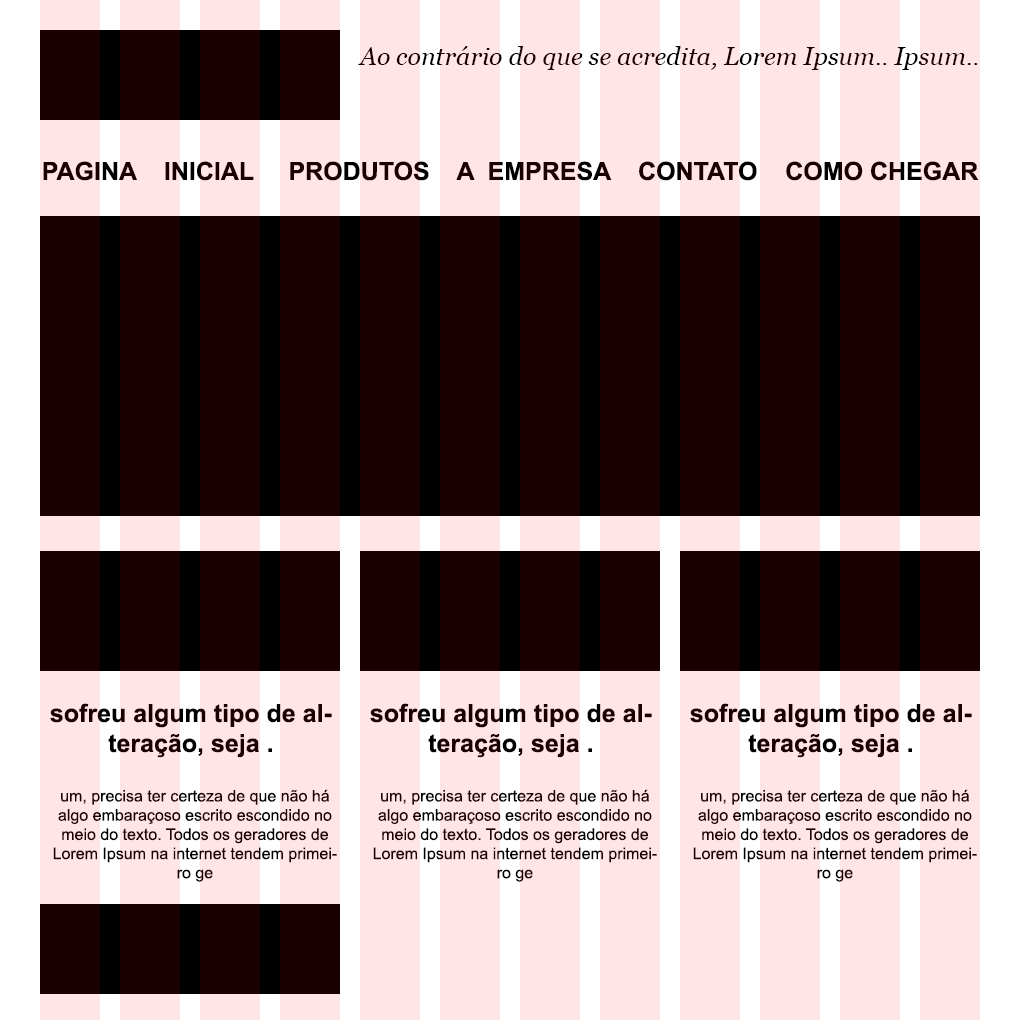
<style>
.page{position:relative;width:1020px;height:1020px;background:#ffe5e5}
.page>*{position:absolute;margin:0}
.t1{font:25px "Georgia-Italic";color:#1a0000}
.t2{font:25px "Arial-BoldMT";color:#1a0000}
.t3{font:16px "ArialMT";color:#1a0000}
</style>
<div class="page">
<p class="t1" style="left:358px;top:46px;width:620px;height:24px">Ao contrário do que se acredita, Lorem Ipsum.. Ipsum..</p>
<p class="t2" style="left:43px;top:161px;width:936px;height:20px">PAGINA    INICIAL     PRODUTOS    A  EMPRESA    CONTATO    COMO CHEGAR</p>
<p class="t2" style="left:50px;top:703px;width:282px;height:55px;text-align:center">sofreu algum tipo de alteração, seja .</p>
<p class="t2" style="left:370px;top:703px;width:282px;height:55px;text-align:center">sofreu algum tipo de alteração, seja .</p>
<p class="t2" style="left:690px;top:703px;width:282px;height:55px;text-align:center">sofreu algum tipo de alteração, seja .</p>
<p class="t3" style="left:53px;top:789px;width:284px;height:93px;text-align:center">um, precisa ter certeza de que não há algo embaraçoso escrito escondido no meio do texto. Todos os geradores de Lorem Ipsum na internet tendem primeiro ge</p>
<p class="t3" style="left:373px;top:789px;width:284px;height:93px;text-align:center">um, precisa ter certeza de que não há algo embaraçoso escrito escondido no meio do texto. Todos os geradores de Lorem Ipsum na internet tendem primeiro ge</p>
<p class="t3" style="left:693px;top:789px;width:284px;height:93px;text-align:center">um, precisa ter certeza de que não há algo embaraçoso escrito escondido no meio do texto. Todos os geradores de Lorem Ipsum na internet tendem primeiro ge</p>
</div>
